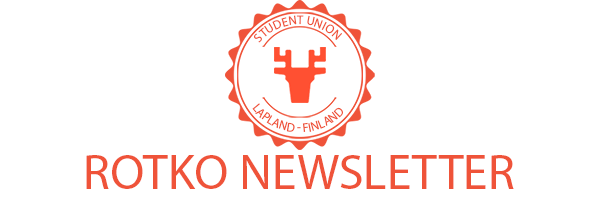
<style>
.page{position:relative;width:600px;height:200px;background:#ffffff}
.page>*{position:absolute;margin:0}
.t1{font:12.5px "MyriadPro-Regular";color:#ef5339;text-transform:uppercase}
.t2{font:6.5px "MyriadPro-Regular";color:#ef5339;text-transform:uppercase}
.t3{font:49.8px "MyriadPro-Regular";color:#ef5339;text-transform:uppercase}
</style>
<div class="page">
<p class="t1" style="left:254px;top:15px;width:88px;height:28px">Student union</p>
<p class="t1" style="left:252px;top:103px;width:91px;height:29px"><span class="t2">                                               </span>Lapland - Finland</p>
<p class="t3" style="left:86px;top:155px;width:428px;height:34px">ROTKO NEWSLETTER</p>
</div>
